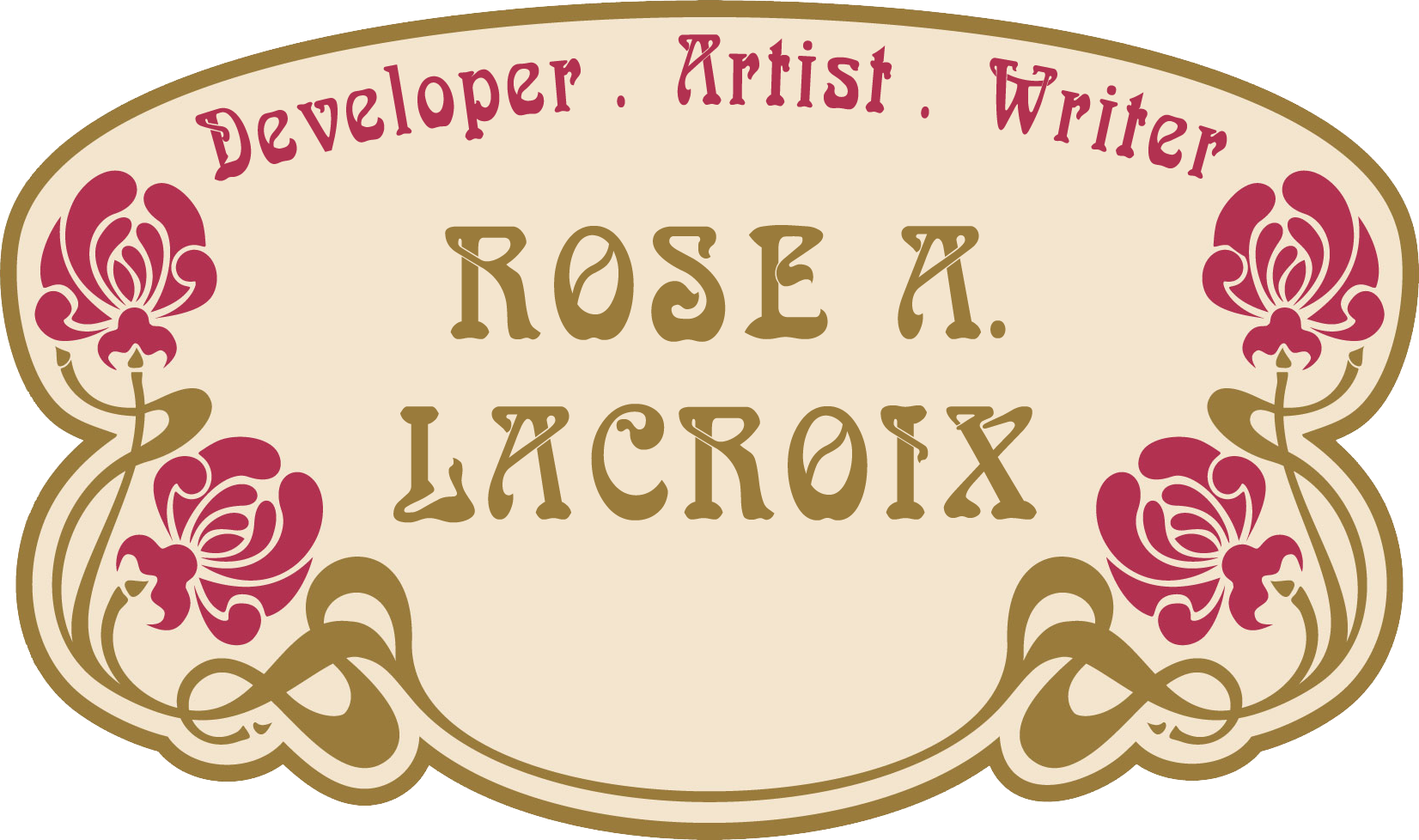
<style>
.page{position:relative;width:1419px;height:840px;background:#f4e5ce}
.page>*{position:absolute;margin:0}
.t1{font:107.4px "Bocklin";color:#b23150;scale:0.73 1}
.t2{font:180.4px "Bocklin";color:#9a7b3b;scale:0.83 1}
</style>
<div class="page">
<p class="t1" style="left:195px;top:34px;width:1033px;height:147px">Developer . Artist . Writer</p>
<p class="t2" style="left:393px;top:225px;width:644px;height:298px;text-align:center">ROSE A.<br>LACROIX</p>
</div>
